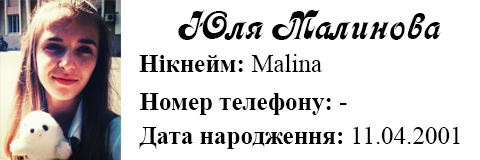
<style>
.page{position:relative;width:480px;height:160px;background:#ffffff}
.page>*{position:absolute;margin:0}
.t1{font:41.7px "Asessor";color:#000000}
.t2{font:25px "TimesNewRomanPS-BoldMT";color:#000000}
.t3{font:25px "TimesNewRomanPSMT";color:#000000}
</style>
<div class="page">
<p class="t1" style="left:178px;top:10px;width:263px;height:30px">Юля Малинова</p>
<p class="t2" style="left:139px;top:54px;width:184px;height:18px">Нікнейм: <span class="t3">Malina</span></p>
<p class="t2" style="left:140px;top:93px;width:207px;height:22px">Номер телефону: <span class="t3">-</span></p>
<p class="t2" style="left:139px;top:127px;width:321px;height:22px">Дата народження: <span class="t3">11.04.2001</span></p>
</div>
